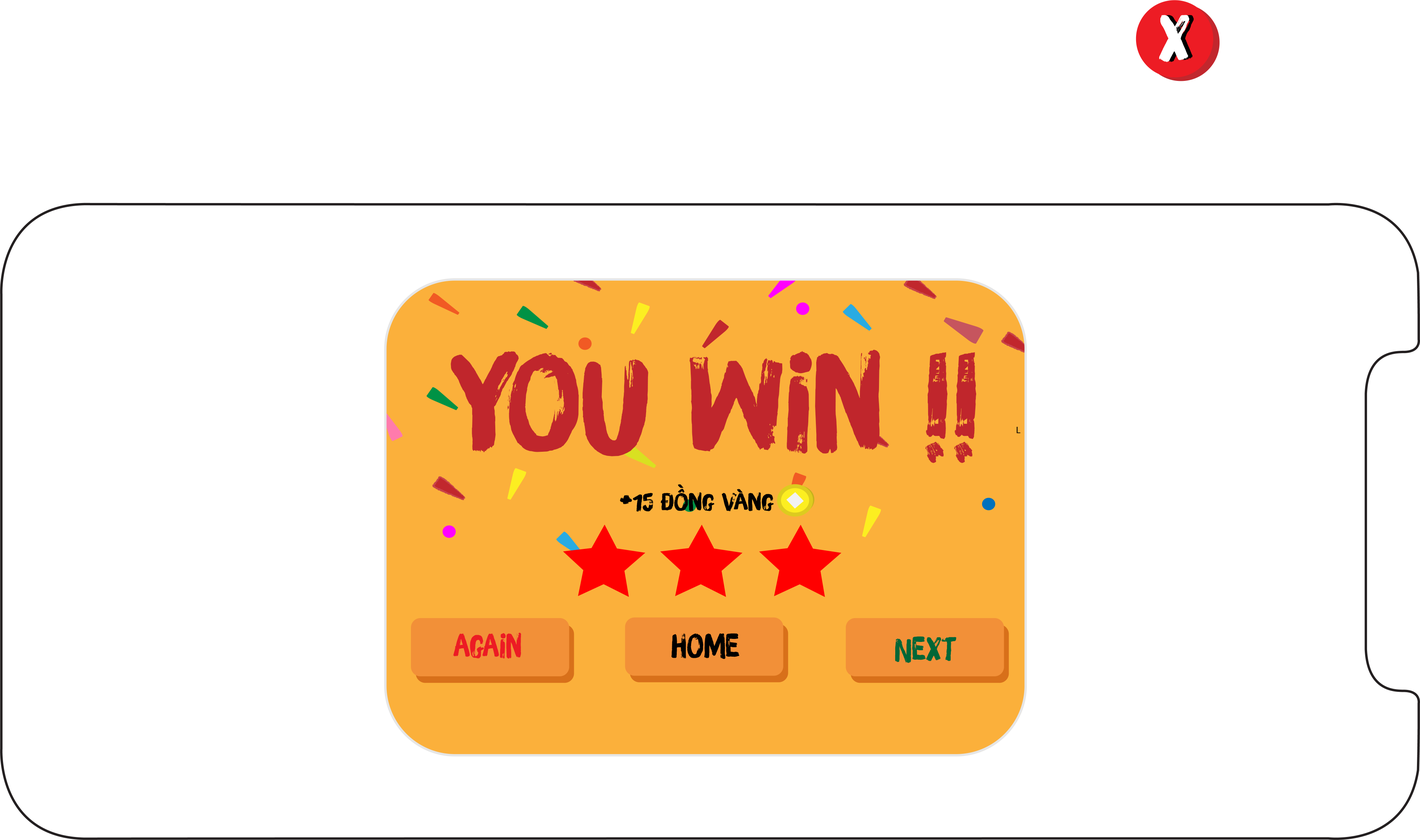
<style>
.page{position:relative;width:1420px;height:840px;background:#ffffff}
.page>*{position:absolute;margin:0}
.t1{font:63px "iCielBrushUp";color:#ffffff}
.t2{font:63px "iCielBrushUp"}
.t3{font:129.6px "iCielBrushUp";color:#c1272d;scale:1.06 1}
.t4{font:23.5px "iCielBrushUp";color:#000000;scale:1.14 1}
.t5{font:33.2px "iCielBrushUp";color:#000000;scale:1.14 1}
.t6{font:32.3px "iCielBrushUp";color:#ed1c24;scale:0.97 1}
.t7{font:32.3px "iCielBrushUp";color:#000000;scale:0.97 1}
.t8{font:32.3px "iCielBrushUp";color:#006837;scale:0.97 1}
</style>
<div class="page">
<p class="t1" style="left:1159px;top:15px;width:30px;height:47px">x</p>
<p class="t2" style="left:1163px;top:15px;width:31px;height:47px">x</p>
<p class="t3" style="left:451px;top:350px;width:525px;height:113px">You win !!</p>
<p class="t4" style="left:620px;top:484px;width:154px;height:28px"><span class="t5">+</span>15 đồng vàng</p>
<p class="t6" style="left:453px;top:632px;width:68px;height:26px">again</p>
<p class="t7" style="left:671px;top:633px;width:68px;height:26px">home</p>
<p class="t8" style="left:895px;top:636px;width:61px;height:27px">Next</p>
</div>
